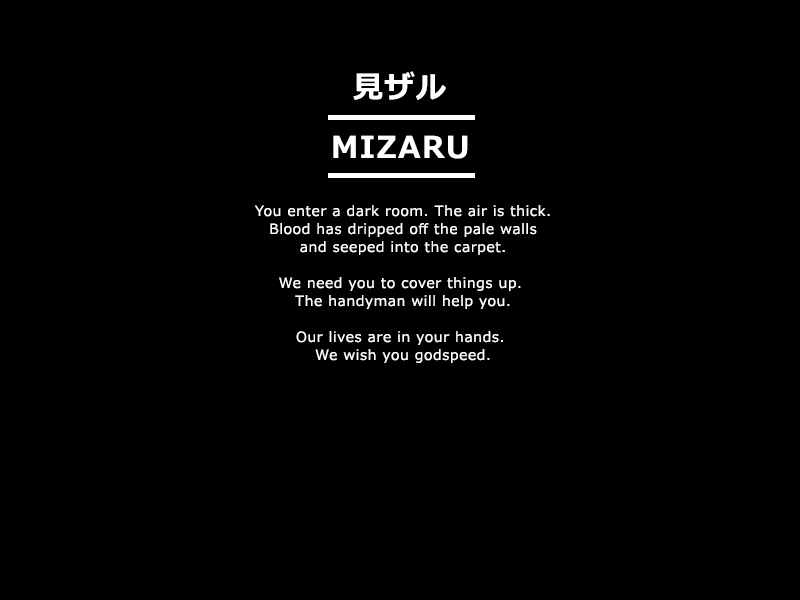
<style>
.page{position:relative;width:800px;height:600px;background:#000000}
.page>*{position:absolute;margin:0}
.t1{font:30px "Meiryo-Bold";letter-spacing:0.05em;color:#ffffff}
.t2{font:14px/18px "Meiryo";letter-spacing:0.05em;color:#ffffff}
</style>
<div class="page">
<p class="t1" style="left:353px;top:71px;width:93px;height:29px">見ザル</p>
<p class="t1" style="left:333px;top:135px;width:135px;height:24px">MIZARU</p>
<p class="t2" style="left:255px;top:205px;width:295px;height:158px;text-align:center">You enter a dark room. The air is thick.<br>Blood has dripped off the pale walls<br>and seeped into the carpet.<br><br>We need you to cover things up. <br>The handyman will help you.<br><br>Our lives are in your hands. <br>We wish you godspeed.</p>
</div>
